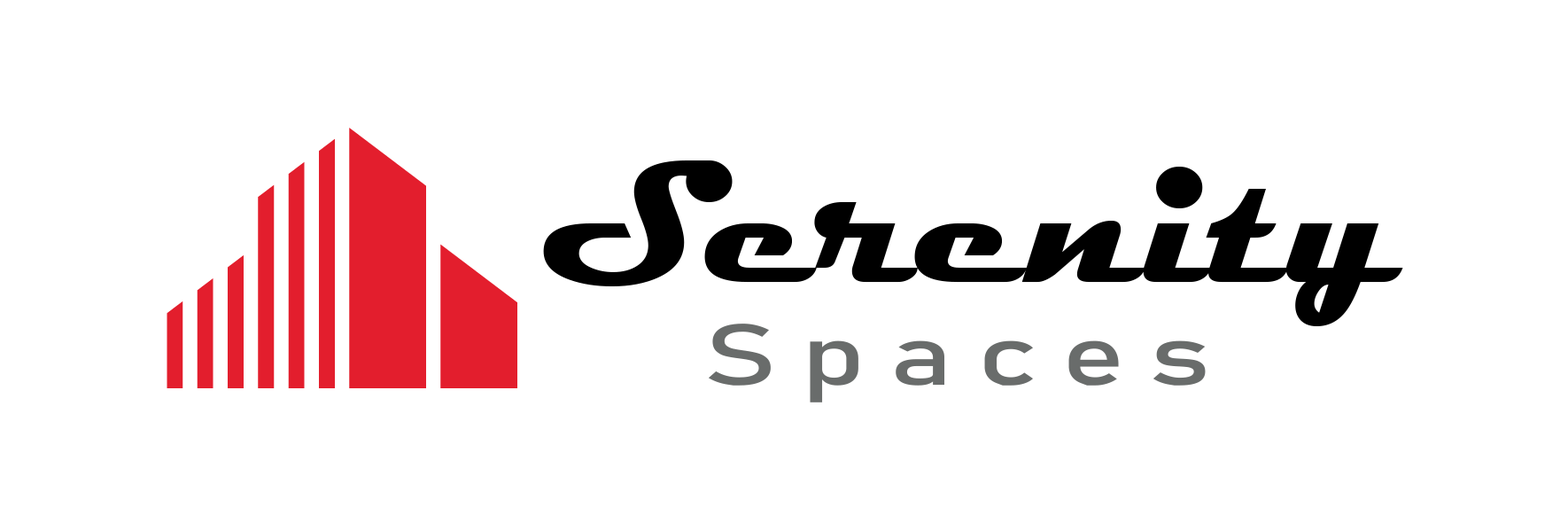
<style>
.page{position:relative;width:1568px;height:531px;background:#ffffff}
.page>*{position:absolute;margin:0}
.t1{font:177.2px/103.4px "Magneto-Bold";color:#000000}
.t2{font:84.9px/103.4px "Bahnschrift";letter-spacing:0.2em;color:#696c6b;scale:1.41 1}
</style>
<div class="page">
<p class="t1" style="left:543px;top:160px;width:860px;height:242px;text-align:center">Serenity<br><span class="t2">Spaces</span></p>
</div>
